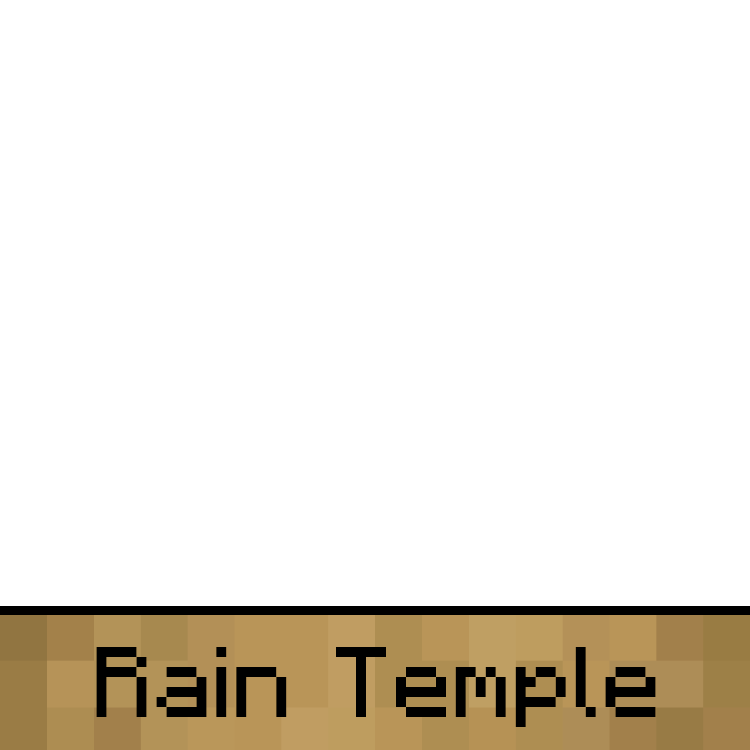
<style>
.page{position:relative;width:750px;height:750px;background:#ffffff}
.page>*{position:absolute;margin:0}
.t1{font:100px "Minecraft-Regular";color:#000000}
</style>
<div class="page">
<p class="t1" style="left:96px;top:647px;width:560px;height:80px">Rain Temple</p>
</div>
